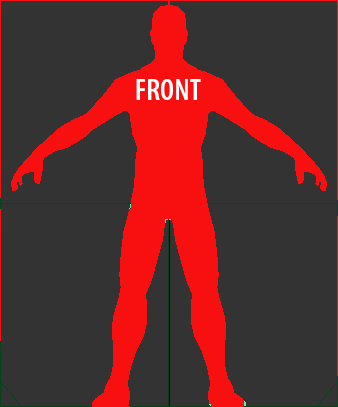
<style>
.page{position:relative;width:338px;height:407px;background:#333333}
.page>*{position:absolute;margin:0}
.t1{font:30px "MyriadPro-SemiboldCond";letter-spacing:0.01em;color:#ffffff;text-transform:uppercase}
</style>
<div class="page">
<p class="t1" style="left:136px;top:79px;width:65px;height:21px">FRONT</p>
</div>
